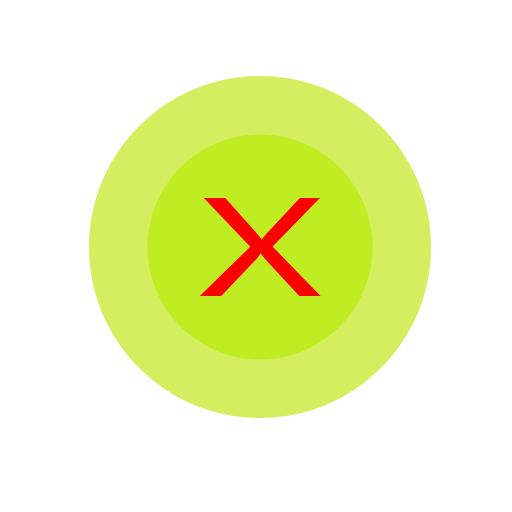
<style>
.page{position:relative;width:512px;height:512px;background:#ffffff}
.page>*{position:absolute;margin:0}
.t1{font:139.6px "SegoeUIHistoric";color:#fb0000;scale:1.54 1}
</style>
<div class="page">
<p class="t1" style="left:199px;top:198px;width:122px;height:98px">X</p>
</div>
